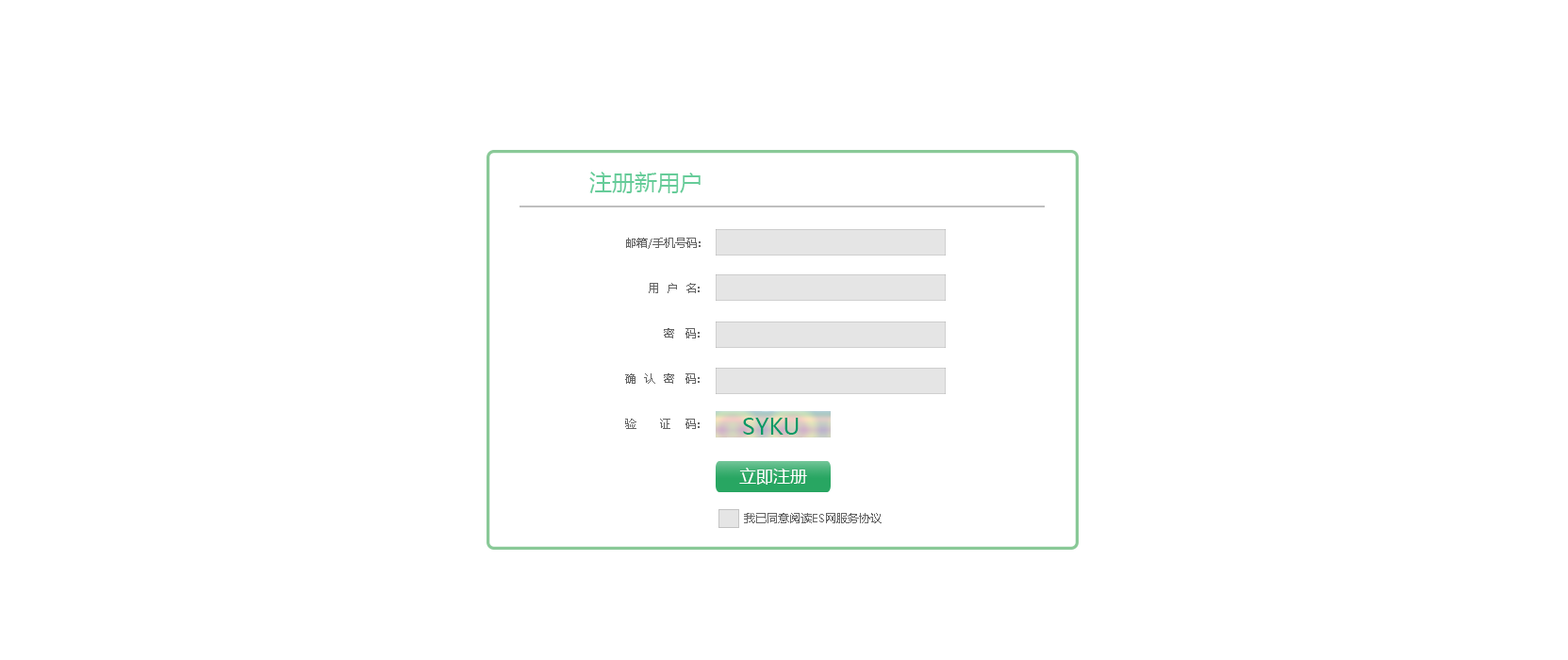
<style>
.page{position:relative;width:1568px;height:660px;background:#ffffff}
.page>*{position:absolute;margin:0}
.t1{font:22.6px "MicrosoftYaHei";color:#66cc99}
.t2{font:11.3px/22.6px "MicrosoftYaHei";color:#666666}
.t3{font:22.6px "MicrosoftYaHei";color:#009966}
.t4{font:17px "MicrosoftYaHei";color:#ffffff}
.t5{font:11.3px "MicrosoftYaHei";color:#666666}
</style>
<div class="page">
<p class="t1" style="left:589px;top:172px;width:112px;height:21px">注册新用户</p>
<p class="t2" style="left:625px;top:238px;width:76px;height:191px">邮箱/手机号码:<br><br>      用  户  名:<br><br>          密   码:<br><br>确  认  密   码:<br><br>验      证    码:</p>
<p class="t3" style="left:743px;top:418px;width:56px;height:17px">SYKU</p>
<p class="t4" style="left:739px;top:468px;width:68px;height:17px">立即注册</p>
<p class="t5" style="left:744px;top:513px;width:138px;height:10px">我已同意阅读ES网服务协议</p>
</div>
